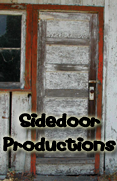
<style>
.page{position:relative;width:117px;height:181px}
.page>*{position:absolute;margin:0}
.t1{font:19.5px "Fat";color:#000000}
</style>
<div class="page">
<p class="t1" style="left:3px;top:111px;width:113px;height:54px;text-align:center">Sidedoor<br>Productions</p>
</div>
